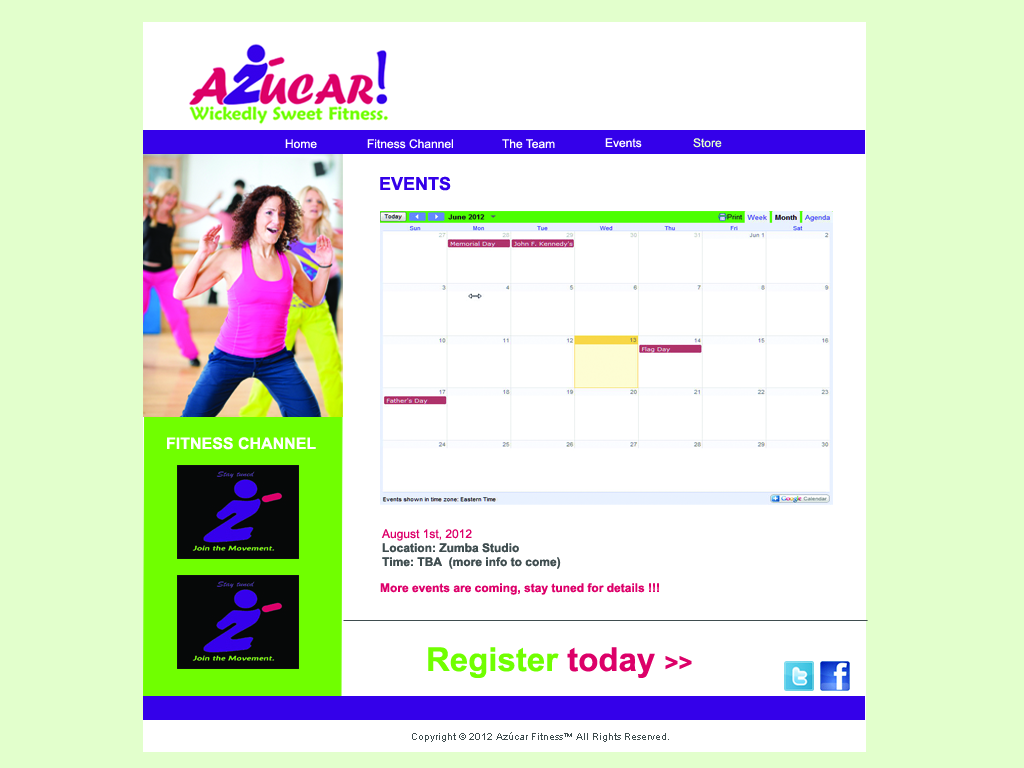
<style>
.page{position:relative;width:1024px;height:768px;background:#ffffff}
.page>*{position:absolute;margin:0}
.t1{font:12px "ArialMT";color:#ffffff}
.t2{font:12px "ArialMT";color:#e2ffcc}
.t3{font:18px "Arial-BoldMT";color:#3400e9}
.t4{font:16px "Arial-BoldMT";color:#ffffff}
.t5{font:12px/14px "Arial-BoldMT";color:#404e4f}
.t6{font:18px/14px "ArialMT";color:#3400e9}
.t7{font:12px/14px "ArialMT";color:#dd006a}
.t8{font:12px "Arial-BoldMT";color:#dd006a}
.t9{font:33px "Arial-BoldMT";color:#70ff00}
.t10{font:33px "Arial-BoldMT";color:#dc0068}
.t11{font:24px "Arial-BoldMT";color:#dc0068}
.t12{font:10px "ArialMT";color:#404e4f}
</style>
<div class="page">
<p class="t1" style="left:285px;top:139px;width:32px;height:10px">Home</p>
<p class="t1" style="left:367px;top:139px;width:86px;height:10px">Fitness Channel</p>
<p class="t1" style="left:502px;top:139px;width:53px;height:10px">The Team</p>
<p class="t1" style="left:605px;top:138px;width:37px;height:10px">Events</p>
<p class="t2" style="left:693px;top:138px;width:29px;height:10px">Store</p>
<p class="t3" style="left:380px;top:176px;width:71px;height:15px">EVENTS</p>
<p class="t4" style="left:167px;top:437px;width:149px;height:13px">FITNESS CHANNEL</p>
<p class="t5" style="left:381px;top:529px;width:180px;height:40px"><span class="t6"><br></span><span class="t7">August 1st, 2012<br></span>Location: Zumba Studio<br>Time: TBA  (more info to come)</p>
<p class="t8" style="left:380px;top:583px;width:279px;height:12px">More events are coming, stay tuned for details !!!</p>
<p class="t9" style="left:428px;top:647px;width:264px;height:31px">Register <span class="t10">today </span><span class="t11">&gt;&gt;</span></p>
<p class="t12" style="left:412px;top:732px;width:257px;height:10px">Copyright © 2012 Azúcar Fitness™ All Rights Reserved.</p>
</div>
